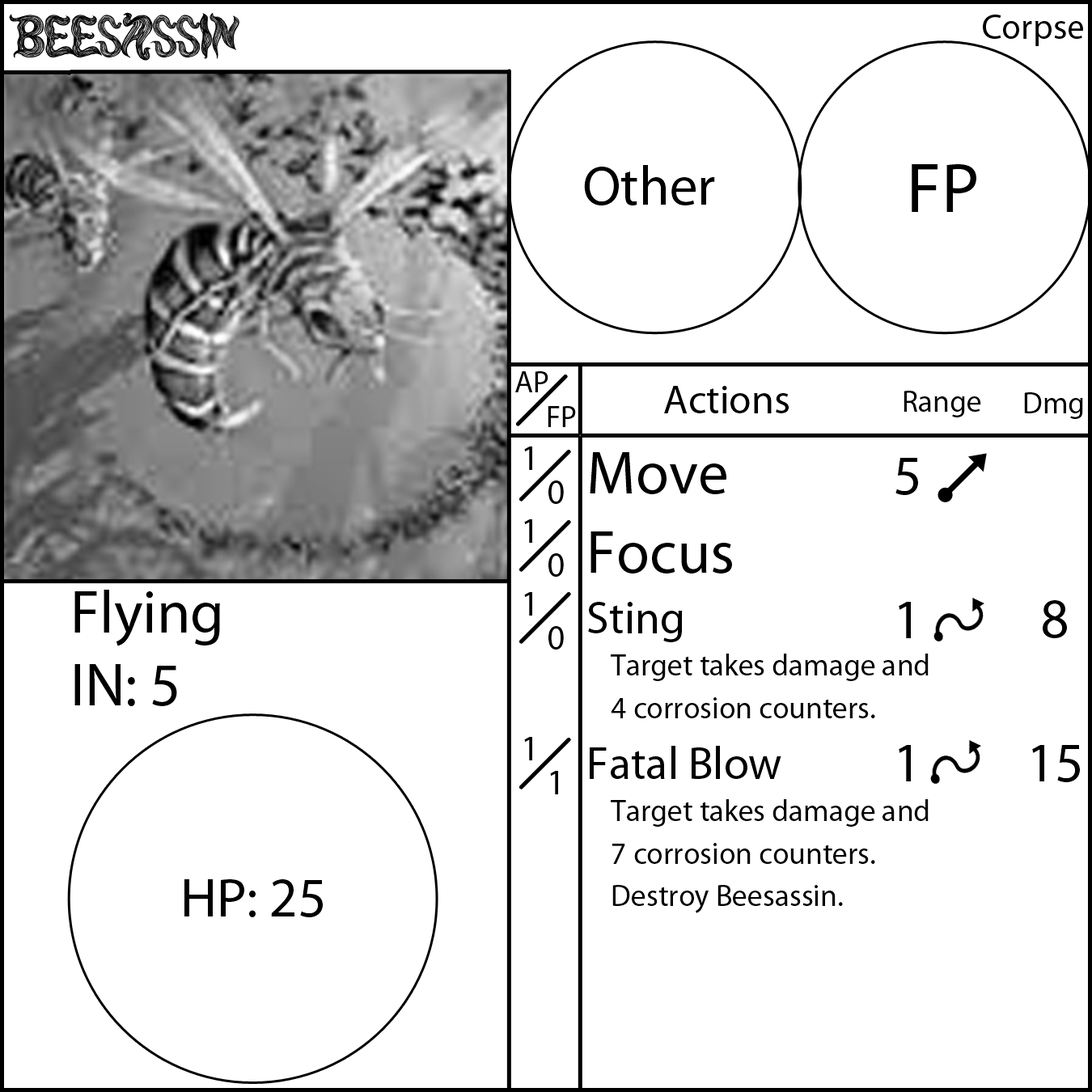
<style>
.page{position:relative;width:1092px;height:1092px;background:#ffffff}
.page>*{position:absolute;margin:0}
.t1{font:60.7px "rambutkusut";color:#000000}
.t2{font:55.6px "MyriadPro-Regular";color:#000000}
.t3{font:70.8px "MyriadPro-Regular";color:#000000}
.t4{font:30.3px "MyriadPro-Regular";color:#000000}
.t5{font:40.4px "MyriadPro-Regular";color:#000000}
.t6{font:35.4px "MyriadPro-Regular";color:#000000}
.t7{font:60.7px "MyriadPro-Regular";color:#000000}
.t8{font:45.5px "MyriadPro-Regular";color:#000000}
</style>
<div class="page">
<p class="t1" style="left:9px;top:12px;width:230px;height:49px">Beesassin</p>
<p class="t2" style="left:584px;top:165px;width:131px;height:40px">Other</p>
<p class="t3" style="left:912px;top:164px;width:64px;height:48px">FP</p>
<p class="t4" style="left:515px;top:371px;width:33px;height:21px">AP</p>
<p class="t5" style="left:664px;top:386px;width:125px;height:27px">Actions</p>
<p class="t4" style="left:904px;top:391px;width:77px;height:26px">Range</p>
<p class="t4" style="left:1024px;top:392px;width:59px;height:27px">Dmg</p>
<p class="t4" style="left:548px;top:406px;width:28px;height:21px">FP</p>
<p class="t6" style="left:524px;top:447px;width:8px;height:313px">1<br>1<br>1<br><br>1</p>
<p class="t4" style="left:588px;top:452px;width:341px;height:461px"><span class="t7">Move<br>Focus<br></span><span class="t8">Sting<br></span> Target takes damage and <br> 4 corrosion counters.<br><span class="t8">Fatal Blow</span><br> Target takes damage and <br> 7 corrosion counters.<br> Destroy Beesassin.</p>
<p class="t2" style="left:895px;top:458px;width:23px;height:323px;text-align:center">5<br><br>1<br><br>1</p>
<p class="t6" style="left:548px;top:480px;width:16px;height:314px">0<br>0<br>0<br><br>1</p>
<p class="t7" style="left:74px;top:590px;width:146px;height:116px">Flying<br>IN: 5</p>
<p class="t2" style="left:1032px;top:600px;width:48px;height:182px;text-align:center">8<br><br>15</p>
<p class="t2" style="left:184px;top:879px;width:139px;height:38px">HP: 25</p>
</div>
